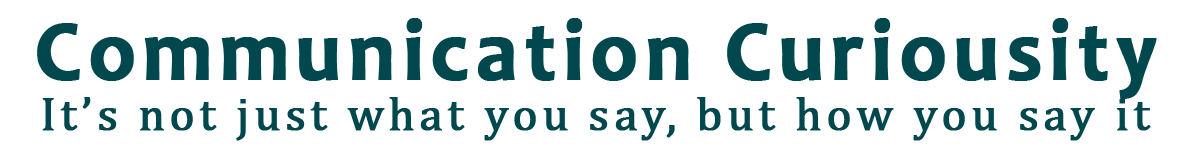
<style>
.page{position:relative;width:1200px;height:150px;background:#ffffff}
.page>*{position:absolute;margin:0}
.t1{font:86.8px "Candara-Bold";letter-spacing:0.07em;color:#00484e;font-weight:bold;scale:0.95 1}
.t2{font:47px "Cambria";letter-spacing:0.083em;color:#00484e;font-weight:bold}
</style>
<div class="page">
<p class="t1" style="left:37px;top:18px;width:1120px;height:81px">Communication Curiousity</p>
<p class="t2" style="left:42px;top:97px;width:1109px;height:44px">It’s not just what you say, but how you say it</p>
</div>
